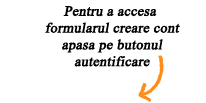
<style>
.page{position:relative;width:206px;height:103px;background:#ffffff}
.page>*{position:absolute;margin:0}
.t1{font:14px "IskoolaPota";color:#010101;font-weight:bold;font-style:italic}
</style>
<div class="page">
<p class="t1" style="left:45px;top:6px;width:135px;height:61px;text-align:center">Pentru a accesa <br>formularul creare cont<br>apasa pe butonul<br>autentificare</p>
</div>
